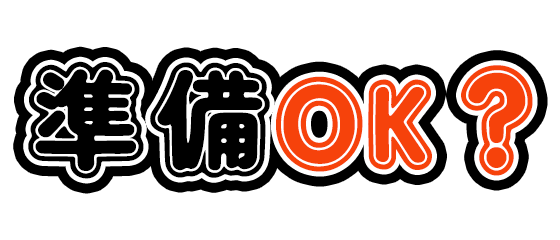
<style>
.page{position:relative;width:560px;height:240px;background:#ffffff}
.page>*{position:absolute;margin:0}
.t1{font:125px "DokiDokiFantasia";color:#f6420b}
.t2{font:125px "DokiDokiFantasia";color:#000000}
</style>
<div class="page">
<p class="t1" style="left:28px;top:61px;width:505px;height:118px"><span class="t2">準備</span>OK？</p>
</div>
